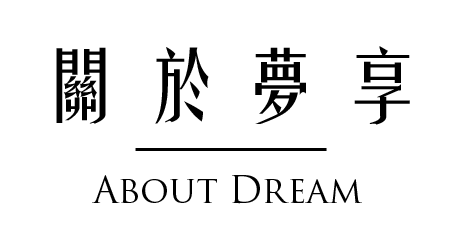
<style>
.page{position:relative;width:460px;height:250px;background:#ffffff}
.page>*{position:absolute;margin:0}
.t1{font:80px "FZYTK--GBK1-0";color:#000000}
.t2{font:36px "TrajanPro-Regular";color:#000000}
</style>
<div class="page">
<p class="t1" style="left:56px;top:46px;width:354px;height:79px">關 於 夢 享</p>
<p class="t2" style="left:92px;top:175px;width:270px;height:29px">About Dream</p>
</div>
